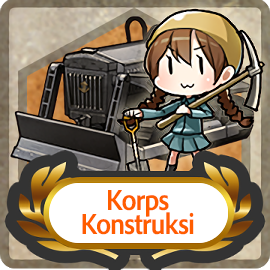
<style>
.page{position:relative;width:270px;height:270px}
.page>*{position:absolute;margin:0}
.t1{font:30px/24px "AdobeClean-Bold";letter-spacing:-0.04em;color:#ff5d00;scale:0.9 1}
</style>
<div class="page">
<p class="t1" style="left:82px;top:190px;width:112px;height:45px;text-align:center">Korps<br>Konstruksi</p>
</div>
